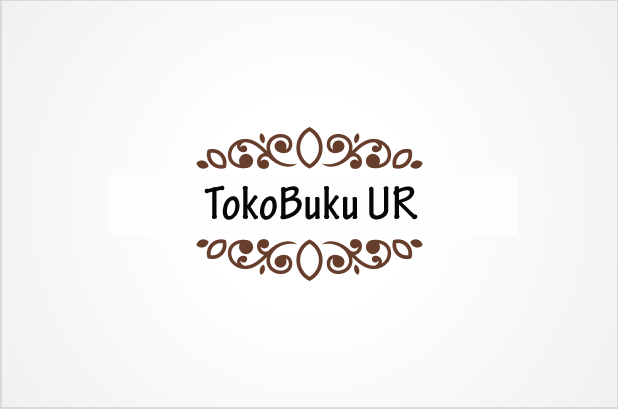
<style>
.page{position:relative;width:618px;height:409px}
.page>*{position:absolute;margin:0}
.t1{font:50px "TektonPro-BoldCond";color:#070707}
</style>
<div class="page">
<p class="t1" style="left:204px;top:185px;width:214px;height:35px">TokoBuku UR</p>
</div>
